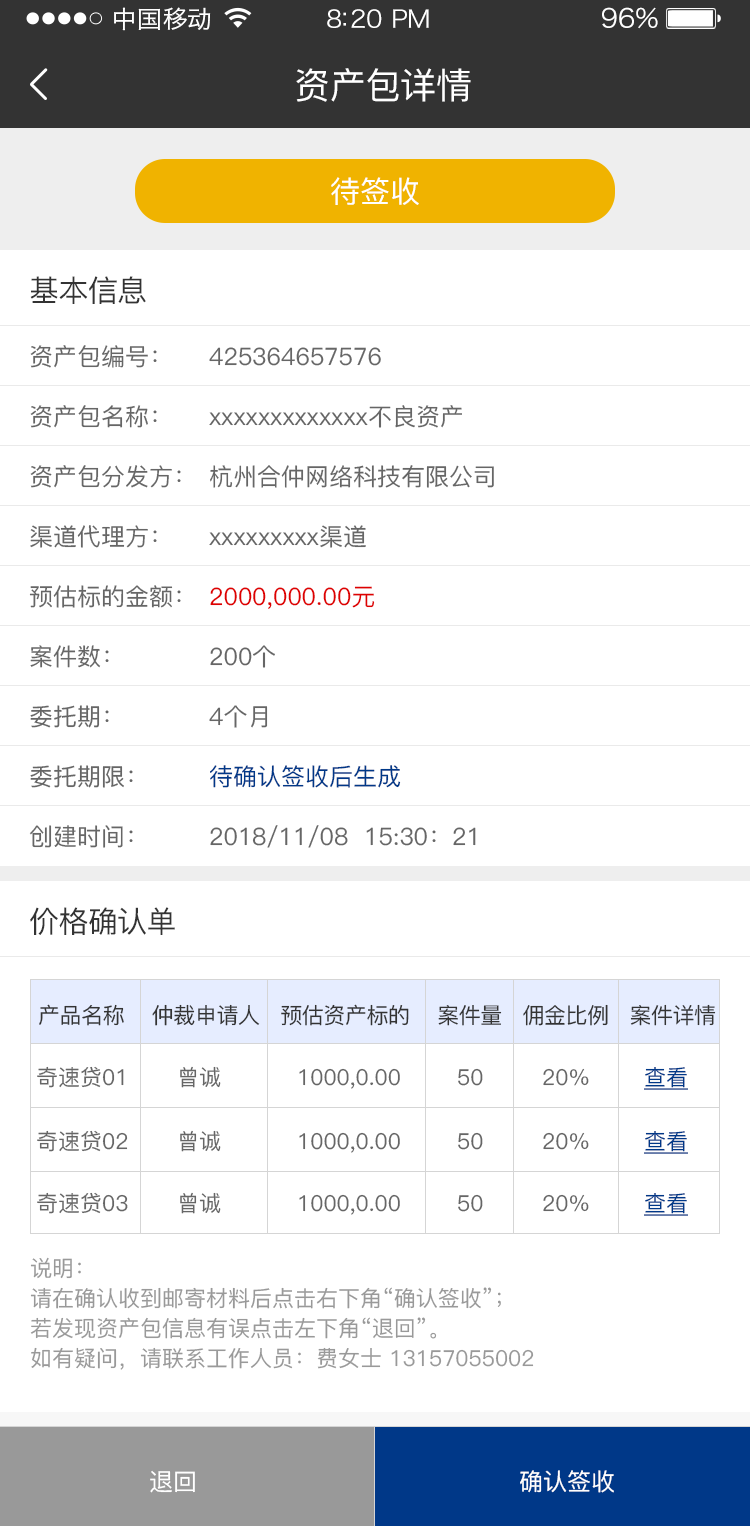
<style>
.page{position:relative;width:750px;height:1526px;background:#ffffff}
.page>*{position:absolute;margin:0}
.t1{font:24px "HiraginoSansGB-W3";letter-spacing:0.02em;color:#ffffff;scale:1.03 1}
.t2{font:24px "HiraginoSansGB-W3";letter-spacing:-0.02em;color:#ffffff;scale:1.03 1}
.t3{font:26.2px "HiraginoSansGB-W3";letter-spacing:-0.02em;color:#ffffff;scale:1.03 1}
.t4{font:36px "PingFang-SC-Medium";letter-spacing:-0.02em;color:#ffffff}
.t5{font:30px "PingFang-SC-Medium";color:#ffffff}
.t6{font:30px "PingFang-SC-Medium";letter-spacing:-0.02em;color:#333333}
.t7{font:24px/60px "PingFang-SC-Medium";color:#666666}
.t8{font:24px/60px "PingFang-SC-Medium";color:#de0101}
.t9{font:24px/60px "PingFang-SC-Medium";color:#003888}
.t10{font:22px "PingFang-SC-Medium";letter-spacing:-0.02em;color:#333333}
.t11{font:22px "PingFang-SC-Medium";color:#666666}
.t12{font:22px "PingFang-SC-Medium";color:#003888;text-decoration:underline}
.t13{font:22px/30px "PingFang-SC-Medium";color:#999999}
.t14{font:24px "PingFang-SC-Medium";color:#ffffff}
</style>
<div class="page">
<p class="t1" style="left:114px;top:7px;width:97px;height:24px">中国移动</p>
<p class="t2" style="left:327px;top:9px;width:102px;height:19px">8:20 PM</p>
<p class="t3" style="left:602px;top:7px;width:56px;height:22px">96%</p>
<p class="t4" style="left:296px;top:68px;width:175px;height:34px">资产包详情</p>
<p class="t5" style="left:331px;top:177px;width:88px;height:28px">待签收</p>
<p class="t6" style="left:30px;top:276px;width:116px;height:28px">基本信息</p>
<p class="t7" style="left:29px;top:345px;width:152px;height:503px">资产包编号：<br>资产包名称：<br>资产包分发方：<br>渠道代理方：<br>预估标的金额：<br>案件数：<br>委托期：<br>委托期限：<br>创建时间：</p>
<p class="t7" style="left:209px;top:347px;width:285px;height:501px">425364657576<br>xxxxxxxxxxxxx不良资产<br>杭州合仲网络科技有限公司<br>xxxxxxxxx渠道<br><span class="t8">2000,000.00元<br></span>200个<br>4个月<br><span class="t9">待确认签收后生成<br></span>2018/11/08  15:30：21</p>
<p class="t6" style="left:30px;top:907px;width:145px;height:28px">价格确认单</p>
<p class="t10" style="left:39px;top:1004px;width:677px;height:22px">产品名称    仲裁申请人   预估资产标的    案件量   佣金比例   案件详情</p>
<p class="t11" style="left:37px;top:1066px;width:87px;height:22px">奇速贷01</p>
<p class="t11" style="left:180px;top:1066px;width:41px;height:22px">曾诚</p>
<p class="t11" style="left:299px;top:1068px;width:101px;height:21px">1000,0.00</p>
<p class="t11" style="left:458px;top:1068px;width:25px;height:18px">50</p>
<p class="t11" style="left:543px;top:1068px;width:46px;height:18px">20%</p>
<p class="t12" style="left:644px;top:1067px;width:44px;height:23px">查看</p>
<p class="t11" style="left:37px;top:1130px;width:91px;height:22px">奇速贷02</p>
<p class="t11" style="left:180px;top:1130px;width:41px;height:22px">曾诚</p>
<p class="t11" style="left:299px;top:1132px;width:101px;height:21px">1000,0.00</p>
<p class="t11" style="left:458px;top:1132px;width:25px;height:18px">50</p>
<p class="t11" style="left:543px;top:1132px;width:46px;height:18px">20%</p>
<p class="t12" style="left:644px;top:1131px;width:44px;height:23px">查看</p>
<p class="t11" style="left:37px;top:1192px;width:91px;height:22px">奇速贷03</p>
<p class="t11" style="left:180px;top:1192px;width:41px;height:22px">曾诚</p>
<p class="t12" style="left:644px;top:1193px;width:44px;height:23px">查看</p>
<p class="t11" style="left:299px;top:1194px;width:101px;height:21px">1000,0.00</p>
<p class="t11" style="left:458px;top:1194px;width:25px;height:18px">50</p>
<p class="t11" style="left:543px;top:1194px;width:46px;height:18px">20%</p>
<p class="t13" style="left:30px;top:1257px;width:504px;height:113px">说明：<br>请在确认收到邮寄材料后点击右下角“确认签收”；<br>若发现资产包信息有误点击左下角“退回”。<br>如有疑问，请联系工作人员：费女士 13157055002</p>
<p class="t14" style="left:150px;top:1470px;width:45px;height:23px">退回</p>
<p class="t14" style="left:520px;top:1470px;width:94px;height:23px">确认签收</p>
</div>
